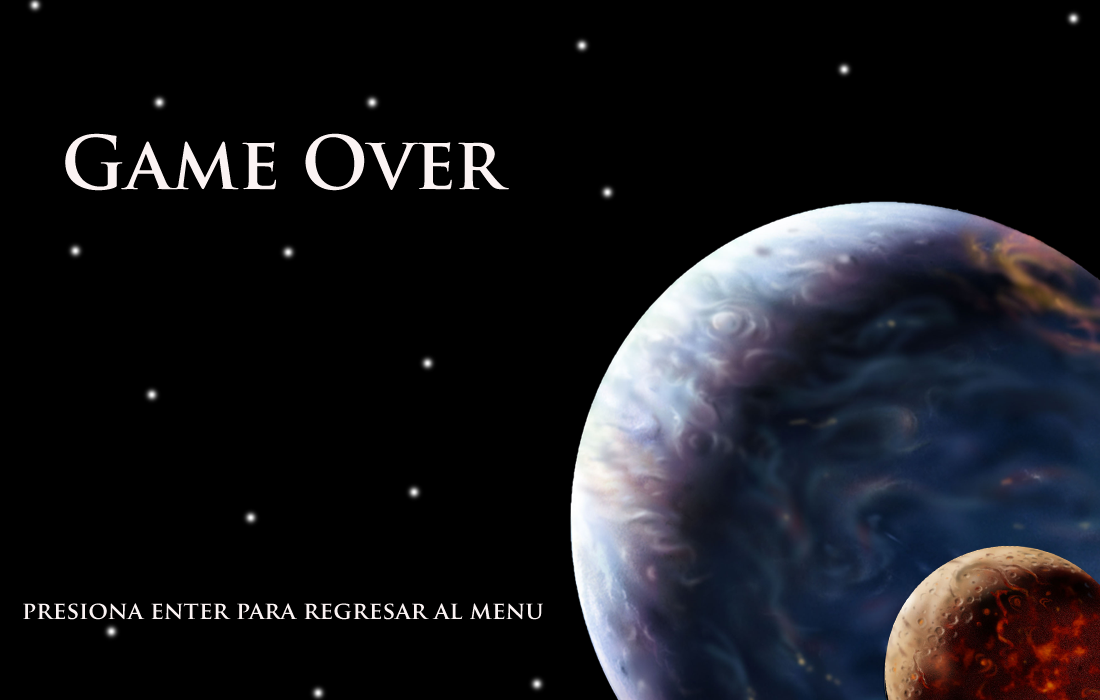
<style>
.page{position:relative;width:1100px;height:700px;background:#000000}
.page>*{position:absolute;margin:0}
.t1{font:72px "TrajanPro-Bold";color:#fbf3f3}
.t2{font:24px "TrajanPro-Bold";color:#fbf3f3}
</style>
<div class="page">
<p class="t1" style="left:65px;top:133px;width:444px;height:58px">Game Over</p>
<p class="t2" style="left:23px;top:603px;width:520px;height:17px">presiona enter para regresar al menu</p>
</div>
